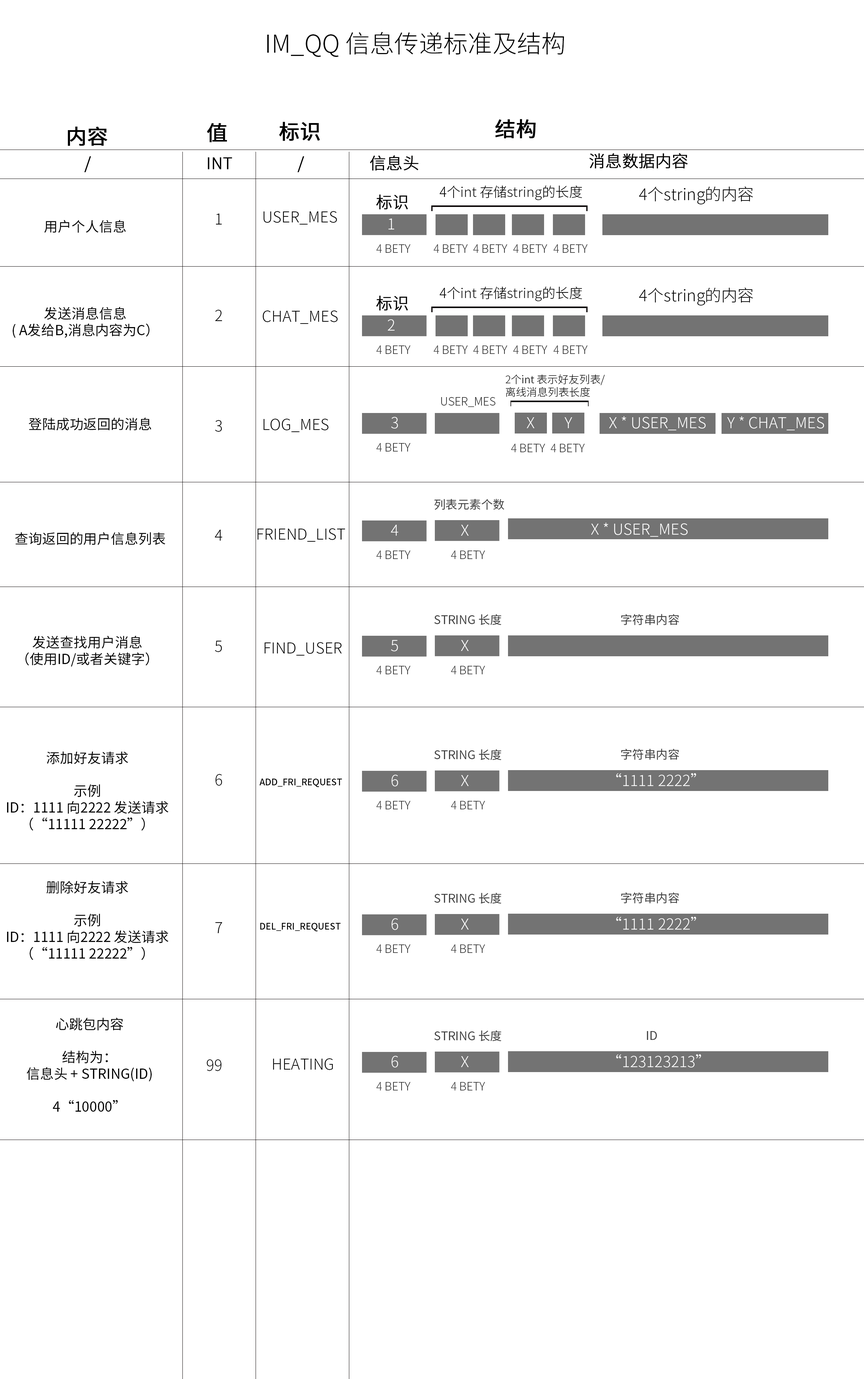
<style>
.page{position:relative;width:864px;height:1379px;background:#ffffff}
.page>*{position:absolute;margin:0}
.t1{font:24.5px "SourceHanSansCN-Light";color:#000000}
.t2{font:20.6px "SourceHanSansCN-Regular";color:#000000;text-transform:uppercase;font-weight:bold}
.t3{font:16.2px "SourceHanSansCN-Light";color:#000000;text-transform:uppercase;font-weight:bold}
.t4{font:13.6px "SourceHanSansCN-Light";color:#000000}
.t5{font:16.2px "SourceHanSansCN-Light";color:#000000}
.t6{font:13.8px "SourceHanSansCN-Regular";color:#000000;text-transform:uppercase}
.t7{font:15.3px "SourceHanSansCN-Light";color:#000000;text-transform:uppercase}
.t8{font:15.3px "SourceHanSansCN-Light";color:#ffffff;text-transform:uppercase}
.t9{font:11.2px "SourceHanSansCN-Light";color:#353535;text-transform:uppercase}
.t10{font:10.7px "SourceHanSansCN-Light";color:#000000}
.t11{font:11.8px "SourceHanSansCN-Regular";color:#424242;text-transform:uppercase}
.t12{font:9px "SourceHanSansCN-Medium";color:#000000;text-transform:uppercase}
</style>
<div class="page">
<p class="t1" style="left:267px;top:32px;width:298px;height:25px">IM_QQ 信息传递标准及结构</p>
<p class="t2" style="left:207px;top:123px;width:20px;height:20px">值</p>
<p class="t2" style="left:279px;top:122px;width:41px;height:19px">标识</p>
<p class="t2" style="left:496px;top:119px;width:40px;height:20px">结构</p>
<p class="t2" style="left:68px;top:127px;width:40px;height:19px">内容</p>
<p class="t3" style="left:84px;top:156px;width:7px;height:16px">/</p>
<p class="t3" style="left:208px;top:157px;width:24px;height:12px">INT</p>
<p class="t3" style="left:297px;top:156px;width:8px;height:16px">/</p>
<p class="t3" style="left:370px;top:155px;width:49px;height:16px">信息头</p>
<p class="t3" style="left:590px;top:153px;width:98px;height:16px">消息数据内容</p>
<p class="t4" style="left:440px;top:185px;width:143px;height:15px">4个int 存储string的长度</p>
<p class="t3" style="left:376px;top:195px;width:32px;height:15px">标识</p>
<p class="t5" style="left:639px;top:186px;width:114px;height:18px">4个string的内容</p>
<p class="t6" style="left:44px;top:220px;width:82px;height:13px">用户个人信息</p>
<p class="t7" style="left:216px;top:214px;width:6px;height:11px">1</p>
<p class="t7" style="left:264px;top:211px;width:73px;height:14px">user_mes</p>
<p class="t8" style="left:389px;top:219px;width:5px;height:11px">1</p>
<p class="t9" style="left:376px;top:244px;width:35px;height:9px">4 bety</p>
<p class="t9" style="left:434px;top:244px;width:34px;height:9px">4 bety</p>
<p class="t9" style="left:473px;top:244px;width:35px;height:9px">4 bety</p>
<p class="t9" style="left:513px;top:244px;width:35px;height:9px">4 bety</p>
<p class="t9" style="left:554px;top:244px;width:34px;height:9px">4 bety</p>
<p class="t4" style="left:440px;top:286px;width:143px;height:15px">4个int 存储string的长度</p>
<p class="t5" style="left:639px;top:288px;width:114px;height:18px">4个string的内容</p>
<p class="t3" style="left:376px;top:296px;width:32px;height:15px">标识</p>
<p class="t6" style="left:13px;top:307px;width:137px;height:31px;text-align:center">发送消息信息<br>( a发给B,消息内容为C）</p>
<p class="t7" style="left:215px;top:310px;width:7px;height:11px">2</p>
<p class="t7" style="left:263px;top:311px;width:75px;height:13px">CHAT_mes</p>
<p class="t8" style="left:388px;top:319px;width:7px;height:12px">2</p>
<p class="t9" style="left:376px;top:346px;width:35px;height:8px">4 bety</p>
<p class="t9" style="left:434px;top:346px;width:34px;height:8px">4 bety</p>
<p class="t9" style="left:473px;top:346px;width:35px;height:8px">4 bety</p>
<p class="t9" style="left:513px;top:346px;width:35px;height:8px">4 bety</p>
<p class="t9" style="left:554px;top:346px;width:34px;height:8px">4 bety</p>
<p class="t10" style="left:506px;top:374px;width:99px;height:23px">2个int 表示好友列表/<br>离线消息列表长度</p>
<p class="t9" style="left:441px;top:397px;width:55px;height:10px">USER_MES</p>
<p class="t6" style="left:29px;top:418px;width:122px;height:13px">登陆成功返回的消息</p>
<p class="t7" style="left:215px;top:420px;width:7px;height:12px">3</p>
<p class="t7" style="left:264px;top:419px;width:65px;height:13px">LOG_mes</p>
<p class="t8" style="left:391px;top:417px;width:7px;height:12px">3</p>
<p class="t8" style="left:527px;top:417px;width:8px;height:11px">x</p>
<p class="t8" style="left:565px;top:417px;width:8px;height:11px">Y</p>
<p class="t8" style="left:609px;top:416px;width:97px;height:14px">x * USER_MES</p>
<p class="t8" style="left:728px;top:416px;width:96px;height:14px">Y * CHAT_MES</p>
<p class="t9" style="left:376px;top:443px;width:35px;height:9px">4 bety</p>
<p class="t9" style="left:511px;top:444px;width:34px;height:8px">4 bety</p>
<p class="t9" style="left:551px;top:444px;width:34px;height:8px">4 bety</p>
<p class="t11" style="left:435px;top:499px;width:70px;height:11px">列表元素个数</p>
<p class="t6" style="left:15px;top:532px;width:151px;height:13px">查询返回的用户信息列表</p>
<p class="t7" style="left:215px;top:530px;width:7px;height:11px">4</p>
<p class="t7" style="left:257px;top:528px;width:88px;height:14px">FRIEND_LIST</p>
<p class="t8" style="left:391px;top:525px;width:8px;height:11px">4</p>
<p class="t8" style="left:461px;top:525px;width:8px;height:11px">X</p>
<p class="t8" style="left:591px;top:523px;width:97px;height:14px">X * user_mes</p>
<p class="t9" style="left:376px;top:551px;width:35px;height:8px">4 bety</p>
<p class="t9" style="left:451px;top:551px;width:34px;height:8px">4 bety</p>
<p class="t11" style="left:434px;top:614px;width:68px;height:11px">string 长度</p>
<p class="t11" style="left:621px;top:614px;width:58px;height:11px">字符串内容</p>
<p class="t6" style="left:25px;top:636px;width:124px;height:31px;text-align:center">发送查找用户消息<br>（使用ID/或者关键字）</p>
<p class="t7" style="left:215px;top:641px;width:7px;height:11px">5</p>
<p class="t8" style="left:391px;top:640px;width:7px;height:12px">5</p>
<p class="t8" style="left:461px;top:640px;width:8px;height:11px">X</p>
<p class="t7" style="left:265px;top:642px;width:77px;height:14px">FIND_USER</p>
<p class="t9" style="left:376px;top:666px;width:35px;height:9px">4 bety</p>
<p class="t9" style="left:451px;top:666px;width:34px;height:9px">4 bety</p>
<p class="t11" style="left:434px;top:749px;width:68px;height:11px">string 长度</p>
<p class="t11" style="left:621px;top:749px;width:58px;height:11px">字符串内容</p>
<p class="t6" style="left:7px;top:752px;width:162px;height:79px;text-align:center">添加好友请求<br><br>示例<br>ID：1111 向2222 发送请求<br>（“11111 22222”）</p>
<p class="t8" style="left:616px;top:773px;width:80px;height:13px">“1111 2222”</p>
<p class="t7" style="left:215px;top:774px;width:7px;height:12px">6</p>
<p class="t12" style="left:260px;top:779px;width:82px;height:8px">ADD_FRI_REQUEST</p>
<p class="t8" style="left:392px;top:775px;width:6px;height:12px">6</p>
<p class="t8" style="left:461px;top:775px;width:8px;height:11px">X</p>
<p class="t9" style="left:376px;top:801px;width:35px;height:9px">4 bety</p>
<p class="t9" style="left:451px;top:801px;width:34px;height:9px">4 bety</p>
<p class="t6" style="left:7px;top:881px;width:162px;height:79px;text-align:center">删除好友请求<br><br>示例<br>ID：1111 向2222 发送请求<br>（“11111 22222”）</p>
<p class="t11" style="left:434px;top:893px;width:68px;height:11px">string 长度</p>
<p class="t11" style="left:621px;top:892px;width:58px;height:12px">字符串内容</p>
<p class="t8" style="left:616px;top:917px;width:80px;height:13px">“1111 2222”</p>
<p class="t7" style="left:215px;top:922px;width:7px;height:11px">7</p>
<p class="t12" style="left:260px;top:923px;width:81px;height:9px">DEL_FRI_REQUEST</p>
<p class="t8" style="left:392px;top:919px;width:6px;height:11px">6</p>
<p class="t8" style="left:461px;top:919px;width:8px;height:11px">X</p>
<p class="t9" style="left:376px;top:945px;width:35px;height:8px">4 bety</p>
<p class="t9" style="left:451px;top:945px;width:34px;height:8px">4 bety</p>
<p class="t6" style="left:27px;top:1018px;width:125px;height:94px;text-align:center">心跳包内容<br><br>结构为：<br>信息头 + string(ID)<br><br>4“10000”</p>
<p class="t11" style="left:434px;top:1030px;width:68px;height:12px">string 长度</p>
<p class="t11" style="left:647px;top:1031px;width:10px;height:9px">ID</p>
<p class="t7" style="left:207px;top:1060px;width:15px;height:11px">99</p>
<p class="t7" style="left:273px;top:1059px;width:60px;height:11px">heating</p>
<p class="t8" style="left:392px;top:1056px;width:6px;height:12px">6</p>
<p class="t8" style="left:461px;top:1056px;width:8px;height:11px">X</p>
<p class="t8" style="left:616px;top:1054px;width:85px;height:14px">“123123213”</p>
<p class="t9" style="left:376px;top:1082px;width:35px;height:9px">4 bety</p>
<p class="t9" style="left:451px;top:1082px;width:34px;height:9px">4 bety</p>
</div>
